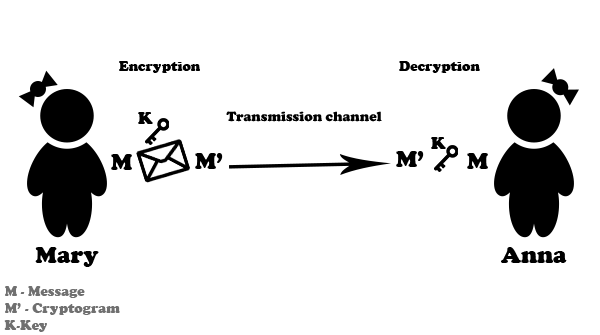
<style>
.page{position:relative;width:600px;height:335px;background:#ffffff}
.page>*{position:absolute;margin:0}
.t1{font:14px "CooperBlack";color:#000000}
.t2{font:18px "CooperBlack";color:#000000}
.t3{font:24px "CooperBlack";color:#000000}
.t4{font:14px "CooperBlack";color:#707070}
</style>
<div class="page">
<p class="t1" style="left:119px;top:61px;width:81px;height:12px">Encryption</p>
<p class="t1" style="left:399px;top:61px;width:81px;height:12px">Decryption</p>
<p class="t2" style="left:138px;top:112px;width:15px;height:12px">K</p>
<p class="t1" style="left:226px;top:111px;width:156px;height:11px">Transmission channel</p>
<p class="t2" style="left:431px;top:137px;width:15px;height:12px">K</p>
<p class="t3" style="left:111px;top:154px;width:21px;height:16px">M</p>
<p class="t3" style="left:195px;top:153px;width:28px;height:16px">M’</p>
<p class="t3" style="left:396px;top:151px;width:28px;height:16px">M’</p>
<p class="t3" style="left:467px;top:153px;width:21px;height:16px">M</p>
<p class="t3" style="left:35px;top:247px;width:64px;height:20px">Mary</p>
<p class="t3" style="left:501px;top:247px;width:66px;height:16px">Anna</p>
<p class="t4" style="left:4px;top:286px;width:116px;height:46px">M - Message<br>M’ - Cryptogram<br>K-Key</p>
</div>
